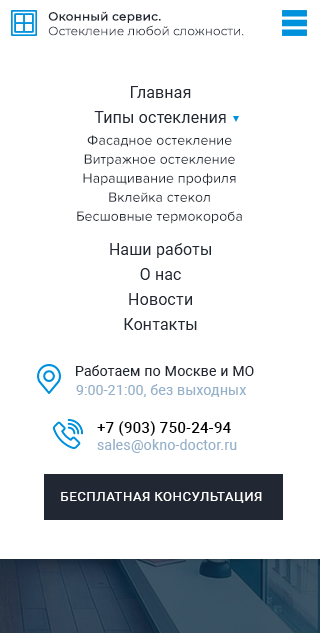
<style>
.page{position:relative;width:320px;height:633px;background:#ffffff}
.page>*{position:absolute;margin:0}
.t1{font:12px/14.6px "Montserrat-Light";letter-spacing:0.01em;color:#212834}
.t2{font:12px/14.6px "Montserrat-Medium";letter-spacing:0.01em;color:#212834}
.t3{font:16px/25px "Roboto-Regular";letter-spacing:0.01em;color:#212834}
.t4{font:16px/32px "Roboto-Regular";letter-spacing:0.01em;color:#212834}
.t5{font:14px/19px "ProximaNova-Regular";letter-spacing:0.01em;color:#212834}
.t6{font:14px "Roboto-Regular";letter-spacing:0.01em;color:#212834}
.t7{font:14px "Roboto-Regular";letter-spacing:0.01em;color:#94b0ca}
.t8{font:15px "Roboto-Medium";letter-spacing:0.01em;color:#000000}
.t9{font:13px "Roboto-Regular";letter-spacing:0.01em;color:#ffffff;text-transform:uppercase}
</style>
<div class="page">
<p class="t1" style="left:48px;top:11px;width:196px;height:25px"><span class="t2">Оконный сервис.<br></span>Остекление любой сложности.</p>
<p class="t1" style="left:48px;top:11px;width:196px;height:25px"><span class="t2">Оконный сервис.<br></span>Остекление любой сложности.</p>
<p class="t3" style="left:94px;top:86px;width:132px;height:244px;text-align:center">Главная<br>Типы остекления<br><br><br><br><br><span class="t4">Наши р</span>аботы<br>О нас<br>Новости<br>Контакты</p>
<p class="t5" style="left:77px;top:135px;width:165px;height:89px;text-align:center">Фасадное остекление<br>Витражное остекление<br>Наращивание профиля<br>Вклейка стекол<br>Бесшовные термокороба</p>
<p class="t6" style="left:76px;top:365px;width:178px;height:11px">Работаем по Москве и МО</p>
<p class="t7" style="left:76px;top:384px;width:171px;height:13px">9:00-21:00, без выходных</p>
<p class="t8" style="left:97px;top:421px;width:134px;height:15px">+7 (903) 750-24-94</p>
<p class="t7" style="left:97px;top:439px;width:140px;height:14px">sales@okno-doctor.ru</p>
<p class="t9" style="left:61px;top:492px;width:201px;height:11px">Бесплатная консультация</p>
</div>
